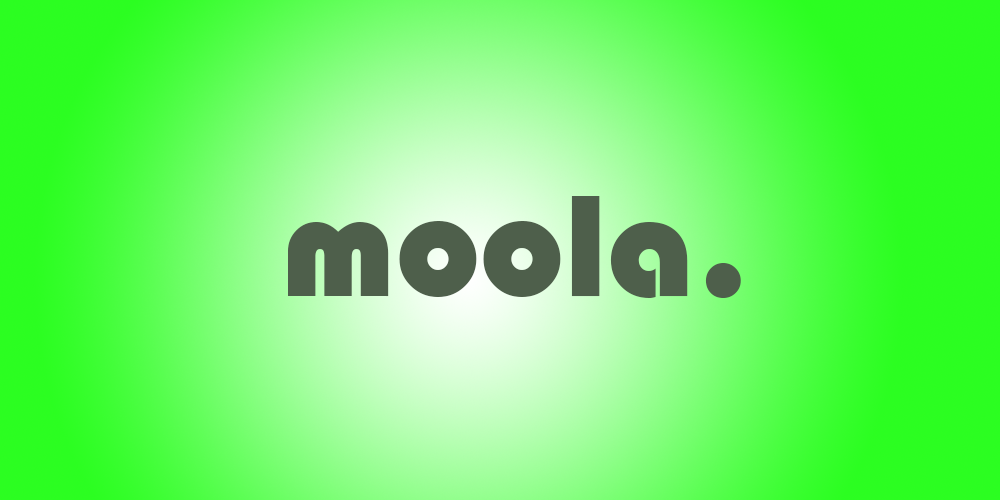
<style>
.page{position:relative;width:1000px;height:500px}
.page>*{position:absolute;margin:0}
.t1{font:150px "Bauhaus93";color:#4e5f4b}
</style>
<div class="page">
<p class="t1" style="left:288px;top:196px;width:453px;height:102px">moola.</p>
</div>
